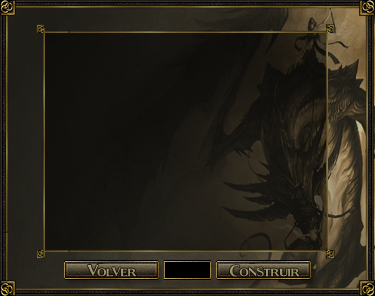
<style>
.page{position:relative;width:375px;height:296px}
.page>*{position:absolute;margin:0}
.t1{font:30px "Fleet-Street";color:#a29566}
.t2{font:30px "Fleet-Street";color:#a09365}
</style>
<div class="page">
<p class="t1" style="left:87px;top:265px;width:50px;height:12px">Volver</p>
<p class="t2" style="left:230px;top:265px;width:70px;height:12px">Construir</p>
</div>
